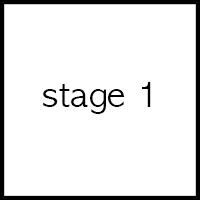
<style>
.page{position:relative;width:200px;height:200px;background:#ffffff}
.page>*{position:absolute;margin:0}
.t1{font:33.3px "AppleGothic";color:#000000}
</style>
<div class="page">
<p class="t1" style="left:43px;top:82px;width:108px;height:32px">stage 1</p>
</div>
